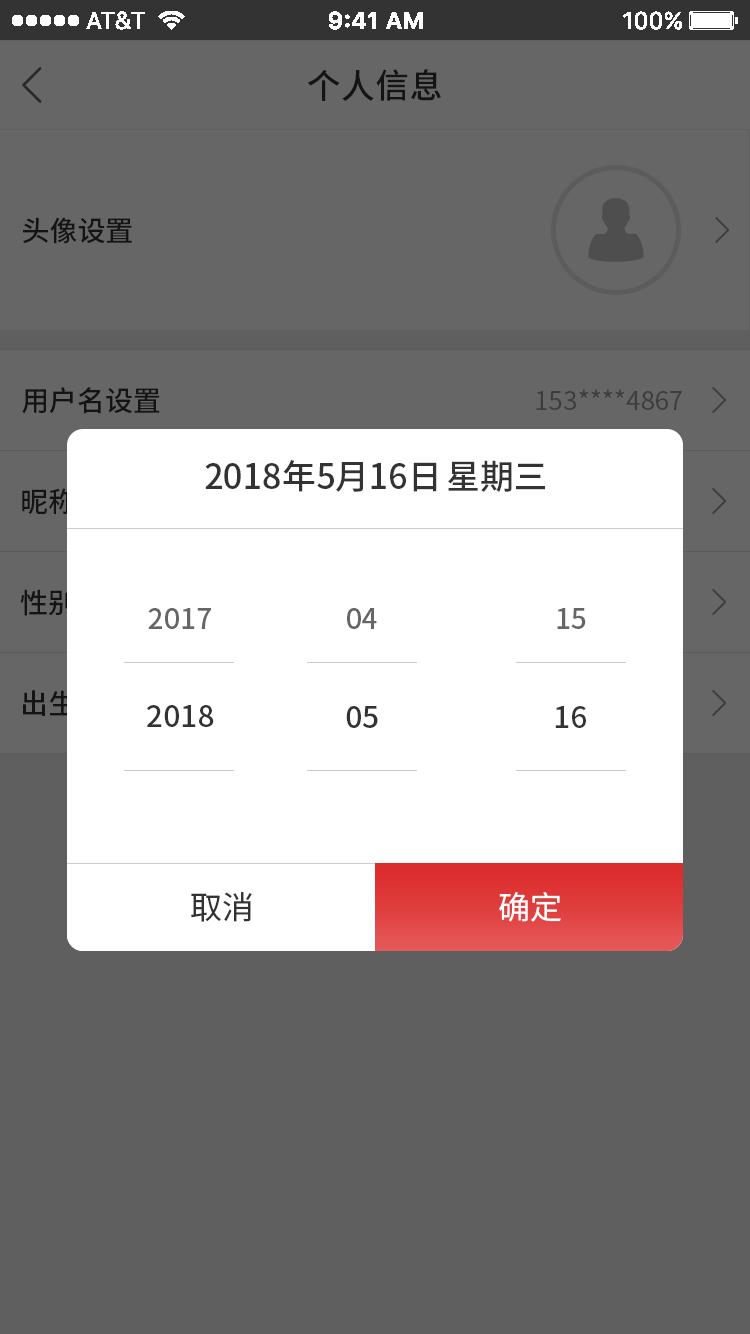
<style>
.page{position:relative;width:750px;height:1334px;background:#5f5f5f}
.page>*{position:absolute;margin:0}
.t1{font:34px "SourceHanSansCN-Medium";color:#141414}
.t2{font:28px "SourceHanSansCN-Medium";color:#141414}
.t3{font:26px "SourceHanSansCN-Regular";color:#3d3d3d}
.t4{font:34px "SourceHanSansCN-Medium";color:#333333}
.t5{font:28px "SourceHanSansCN-Medium";color:#666666}
.t6{font:30px "SourceHanSansCN-Medium";color:#333333}
.t7{font:32px "SourceHanSansCN-Regular";color:#333333}
.t8{font:32px "SourceHanSansCN-Regular";color:#ffffff}
</style>
<div class="page">
<p class="t1" style="left:307px;top:69px;width:134px;height:32px">个人信息</p>
<p class="t2" style="left:23px;top:217px;width:109px;height:27px">头像设置</p>
<p class="t2" style="left:22px;top:387px;width:138px;height:27px">用户名设置</p>
<p class="t3" style="left:536px;top:389px;width:146px;height:21px">153****4867</p>
<p class="t4" style="left:205px;top:460px;width:232px;height:32px">2018年5月16日</p>
<p class="t4" style="left:448px;top:460px;width:97px;height:32px">星期三</p>
<p class="t2" style="left:22px;top:488px;width:53px;height:26px">昵称</p>
<p class="t2" style="left:20px;top:589px;width:54px;height:27px">性别</p>
<p class="t5" style="left:148px;top:608px;width:63px;height:21px">2017</p>
<p class="t5" style="left:347px;top:608px;width:30px;height:21px">04</p>
<p class="t5" style="left:557px;top:608px;width:29px;height:21px">15</p>
<p class="t6" style="left:147px;top:705px;width:67px;height:22px">2018</p>
<p class="t6" style="left:346px;top:706px;width:32px;height:22px">05</p>
<p class="t6" style="left:555px;top:706px;width:31px;height:22px">16</p>
<p class="t7" style="left:191px;top:892px;width:61px;height:30px">取消</p>
<p class="t8" style="left:499px;top:892px;width:62px;height:30px">确定</p>
</div>
